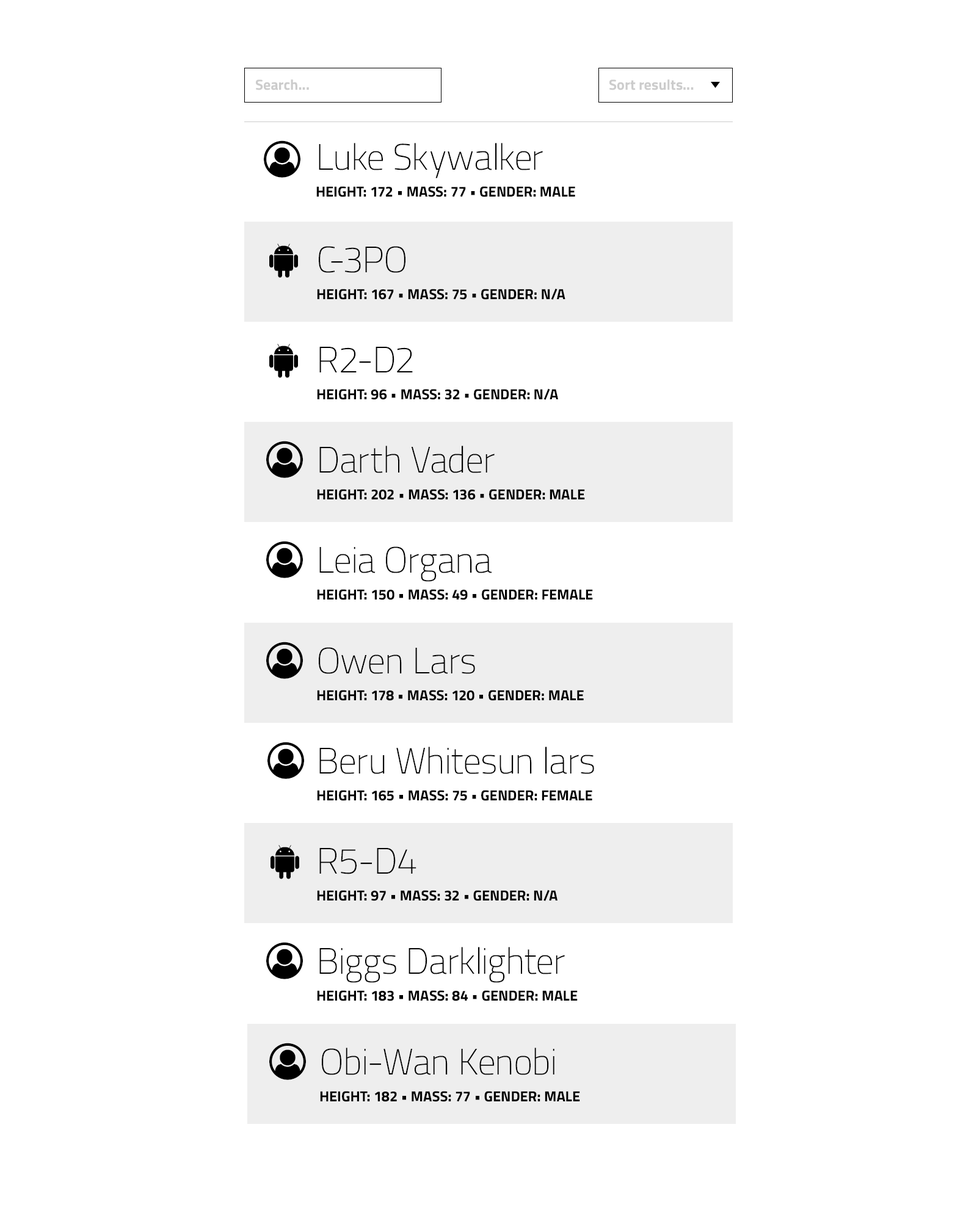
<style>
.page{position:relative;width:977px;height:1221px;background:#ffffff}
.page>*{position:absolute;margin:0}
.t1{font:14.7px "TitilliumWeb-Bold";color:#cccccc}
.t2{font:14.7px/26.9px "TitilliumWeb-Bold";color:#000000;text-transform:uppercase}
.t3{font:36.6px "TitilliumWeb-ExtraLight";color:#000000}
</style>
<div class="page">
<p class="t1" style="left:256px;top:79px;width:53px;height:11px">Search...</p>
<p class="t1" style="left:609px;top:79px;width:84px;height:11px">Sort results...</p>
<p class="t2" style="left:316px;top:143px;width:259px;height:54px"><span class="t3">Luke Skywalker<br></span>Height: 172 • Mass: 77 • Gender: Male</p>
<p class="t2" style="left:317px;top:246px;width:248px;height:54px"><span class="t3">C-3PO<br></span>Height: 167 • Mass: 75 • Gender: N/A</p>
<p class="t2" style="left:317px;top:347px;width:241px;height:53px"><span class="t3">R2-D2<br></span>Height: 96 • Mass: 32 • Gender: N/A</p>
<p class="t2" style="left:317px;top:446px;width:268px;height:54px"><span class="t3">Darth Vader<br></span>Height: 202 • Mass: 136 • Gender: Male</p>
<p class="t2" style="left:317px;top:546px;width:276px;height:54px"><span class="t3">Leia Organa<br></span>Height: 150 • Mass: 49 • Gender: Female</p>
<p class="t2" style="left:317px;top:647px;width:267px;height:54px"><span class="t3">Owen Lars<br></span>Height: 178 • Mass: 120 • Gender: Male</p>
<p class="t2" style="left:317px;top:747px;width:277px;height:54px"><span class="t3">Beru Whitesun lars<br></span>Height: 165 • Mass: 75 • Gender: Female</p>
<p class="t2" style="left:317px;top:848px;width:240px;height:53px"><span class="t3">R5-D4<br></span>Height: 97 • Mass: 32 • Gender: N/A</p>
<p class="t2" style="left:317px;top:947px;width:260px;height:54px"><span class="t3">Biggs Darklighter<br></span>Height: 183 • Mass: 84 • Gender: Male</p>
<p class="t2" style="left:320px;top:1048px;width:260px;height:54px"><span class="t3">Obi-Wan Kenobi<br></span>Height: 182 • Mass: 77 • Gender: Male</p>
</div>
